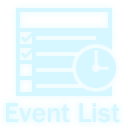
<style>
.page{position:relative;width:128px;height:128px;background:#d6f7ff}
.page>*{position:absolute;margin:0}
.t1{font:28px "FranklinGothic-Medium";color:#d6f7ff}
</style>
<div class="page">
<p class="t1" style="left:6px;top:103px;width:114px;height:20px">Event List</p>
<p class="t1" style="left:6px;top:103px;width:114px;height:20px">Event List</p>
</div>
